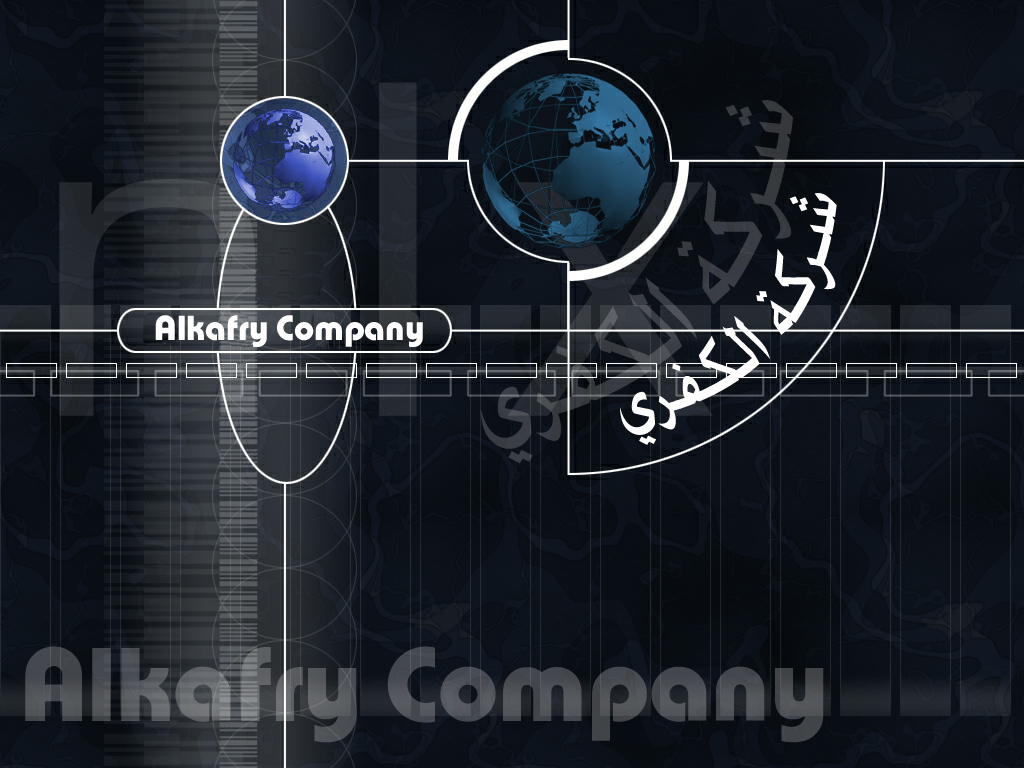
<style>
.page{position:relative;width:1024px;height:768px}
.page>*{position:absolute;margin:0}
.t1{font:96.6px "ALW-CoolKhaybar";color:#ffffff;scale:0.62 1}
.t2{font:36.6px "PumpDemiBoldLetPlain";color:#ffffff}
.t3{font:109.3px "PumpDemiBoldLetPlain";color:#515459}
</style>
<div class="page">
<p class="t1" style="left:620px;top:193px;width:217px;height:252px;rotate:-46deg">شركة الكفري</p>
<p class="t2" style="left:155px;top:315px;width:268px;height:32px">Alkafry Company</p>
<p class="t3" style="left:25px;top:646px;width:799px;height:97px">Alkafry Company</p>
</div>
